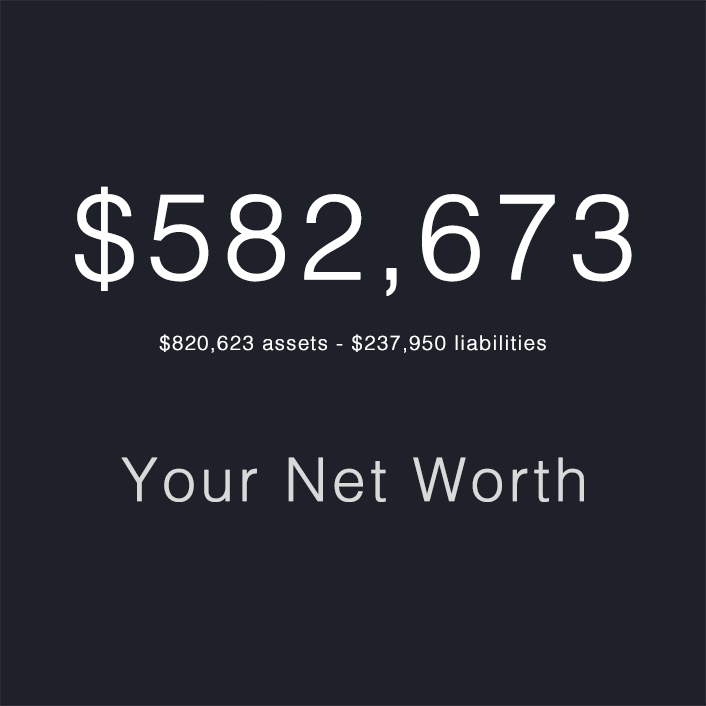
<style>
.page{position:relative;width:706px;height:706px;background:#1e212a}
.page>*{position:absolute;margin:0}
.t1{font:120px "Helvetica-Light";letter-spacing:0.05em;color:#ffffff;font-weight:bold}
.t2{font:20px "Helvetica-Light";letter-spacing:0.05em;color:#ffffff;font-weight:bold}
.t3{font:60px "Helvetica-Light";letter-spacing:0.05em;color:#dadada;font-weight:bold}
</style>
<div class="page">
<p class="t1" style="left:75px;top:186px;width:557px;height:110px">$582,673</p>
<p class="t2" style="left:159px;top:334px;width:387px;height:19px">$820,623 assets - $237,950 liabilities</p>
<p class="t3" style="left:121px;top:457px;width:463px;height:45px">Your Net Worth</p>
</div>
